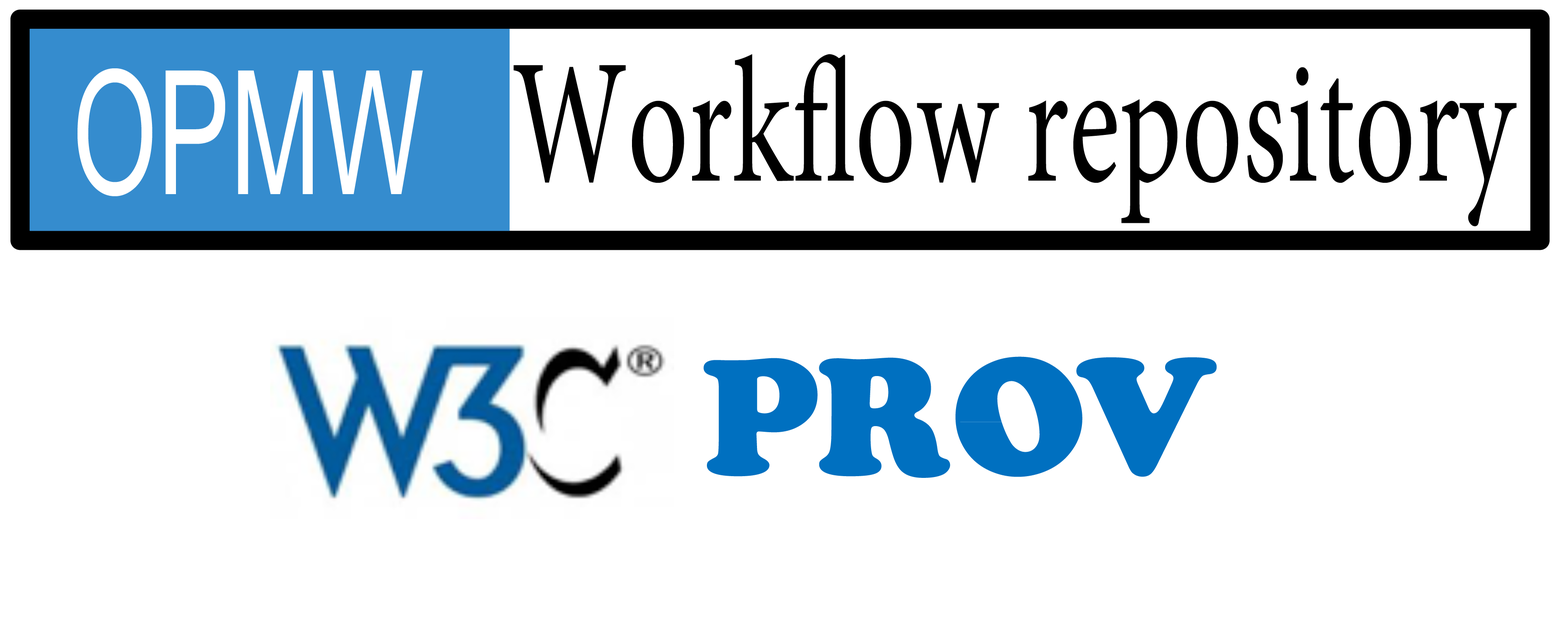
<style>
.page{position:relative;width:1568px;height:625px;background:#ffffff}
.page>*{position:absolute;margin:0}
.t1{font:177.6px "MinionPro-Regular";color:#000000;scale:0.67 1}
.t2{font:172.7px "ArialMT";color:#ffffff;scale:0.63 1}
</style>
<div class="page">
<p class="t1" style="left:514px;top:54px;width:1003px;height:172px">Workflow repository</p>
<p class="t2" style="left:77px;top:68px;width:346px;height:128px">OPMW</p>
</div>
